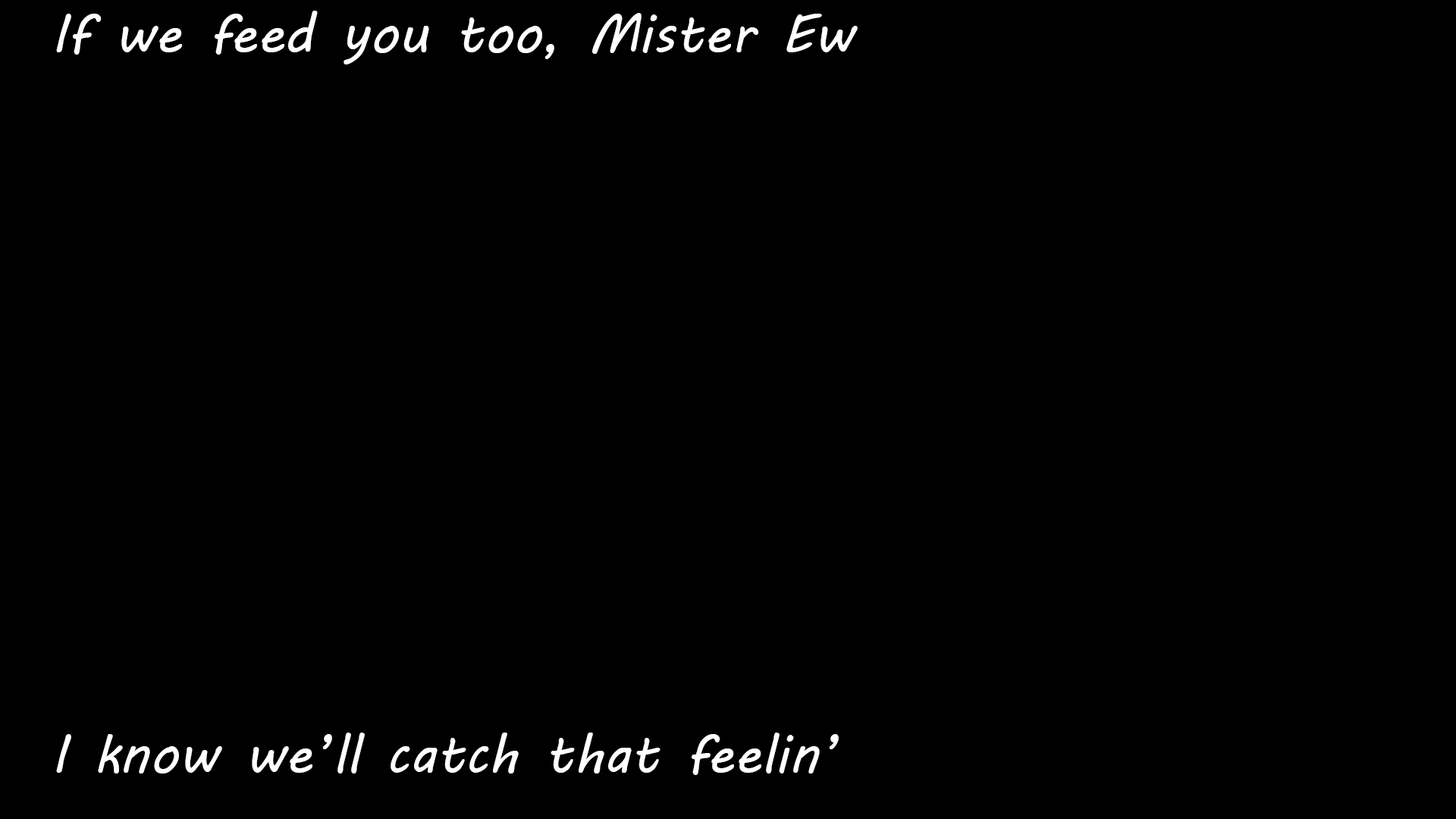
<style>
.page{position:relative;width:1456px;height:819px;background:#000000}
.page>*{position:absolute;margin:0}
.t1{font:54.6px "MVBoli";color:#ffffff}
</style>
<div class="page">
<p class="t1" style="left:56px;top:11px;width:802px;height:764px">If we feed you too, Mister Ew <br><br><br><br><br><br><br><br><br><br> <br>I know we’ll catch that feelin’</p>
</div>
